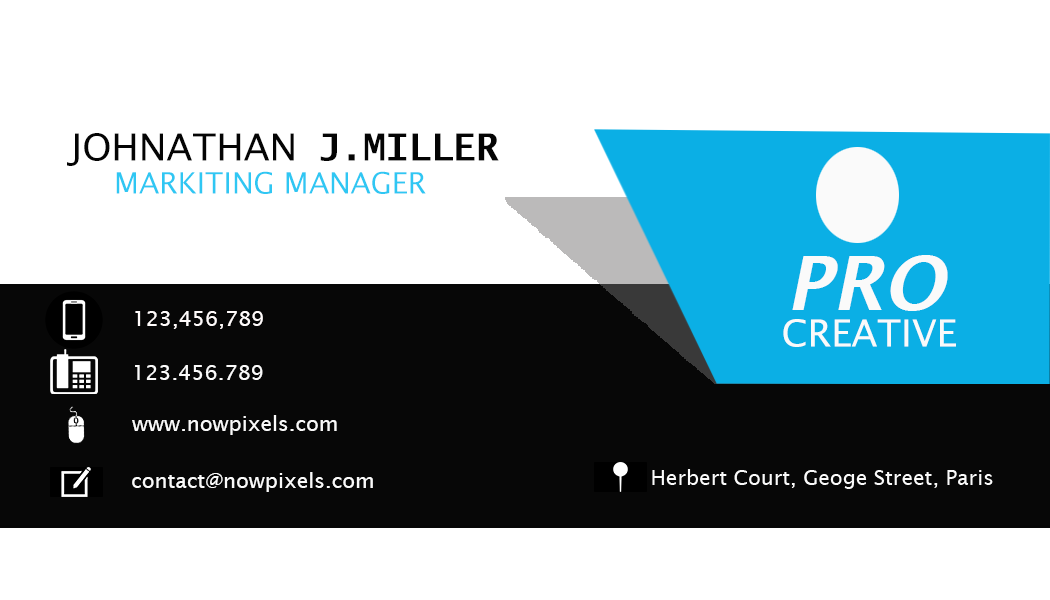
<style>
.page{position:relative;width:1050px;height:600px;background:#ffffff}
.page>*{position:absolute;margin:0}
.t1{font:37.5px "LucidaSansUnicode";color:#040404}
.t2{font:37.5px "LucidaSans-TypewriterBold";color:#040404}
.t3{font:29.2px "LucidaSans";color:#2fc7f3}
.t4{font:75px "LucidaSans-DemiItalic";color:#fafafa}
.t5{font:20.8px "LucidaSans";color:#fffbfb}
.t6{font:37.5px "LucidaSansUnicode";color:#fafafa}
.t7{font:20.8px "LucidaSans";color:#fafafa}
</style>
<div class="page">
<p class="t1" style="left:67px;top:133px;width:227px;height:33px">JOHNATHAN</p>
<p class="t2" style="left:320px;top:133px;width:179px;height:28px">J.MILLER</p>
<p class="t3" style="left:116px;top:171px;width:310px;height:23px">MARKITING MANAGER</p>
<p class="t4" style="left:792px;top:255px;width:156px;height:56px">PRO</p>
<p class="t5" style="left:135px;top:311px;width:128px;height:18px">123,456,789</p>
<p class="t6" style="left:783px;top:319px;width:173px;height:28px">CREATIVE</p>
<p class="t7" style="left:135px;top:365px;width:128px;height:15px">123.456.789</p>
<p class="t7" style="left:132px;top:415px;width:205px;height:20px">www.nowpixels.com</p>
<p class="t7" style="left:132px;top:472px;width:241px;height:20px">contact@nowpixels.com</p>
</div>
